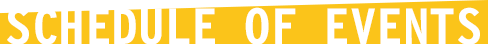
<style>
.page{position:relative;width:488px;height:44px;background:#fbc41a}
.page>*{position:absolute;margin:0}
.t1{font:53px "LetterGothic12PitchBT-Bold";color:#ffffff;text-transform:uppercase}
</style>
<div class="page">
<p class="t1" style="left:7px;top:7px;width:473px;height:38px">Schedule of events</p>
</div>
